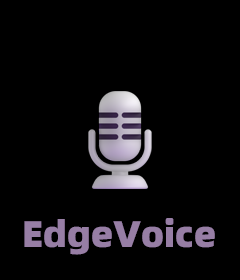
<style>
.page{position:relative;width:240px;height:280px;background:#000000}
.page>*{position:absolute;margin:0}
.t1{font:37px "AlibabaPuHuiTi_2_115_Black";color:#977ea5}
</style>
<div class="page">
<p class="t1" style="left:24px;top:218px;width:191px;height:37px">EdgeVoice</p>
</div>
